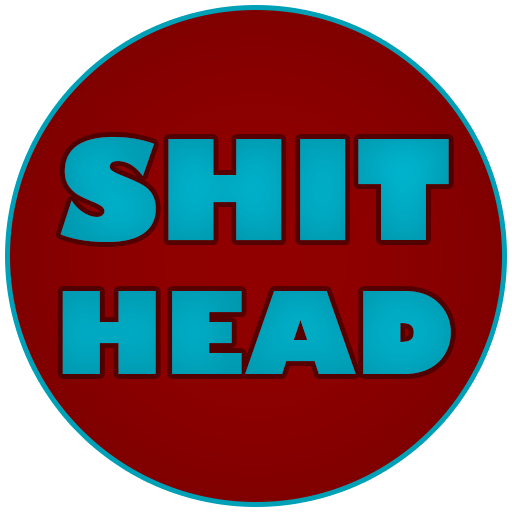
<style>
.page{position:relative;width:512px;height:512px;background:#ffffff}
.page>*{position:absolute;margin:0}
.t1{font:136px "GillSans-UltraBold";color:#00a6be}
.t2{font:112px "GillSans-UltraBold";color:#00a6be}
</style>
<div class="page">
<p class="t1" style="left:60px;top:137px;width:391px;height:237px;text-align:center">SHIT<br><span class="t2">HEAD</span></p>
</div>
